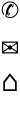
<style>
.page{position:relative;width:20px;height:140px;background:#ffffff}
.page>*{position:absolute;margin:0}
.t1{font:30px "Menlo-Regular";color:#000000}
</style>
<div class="page">
<p class="t1" style="left:1px;top:1px;width:18px;height:90px">✆<br>✉<br>⌂</p>
</div>
